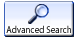
<style>
.page{position:relative;width:80px;height:40px;background:#ffffff}
.page>*{position:absolute;margin:0}
.t1{font:10px "MyriadPro-Regular";letter-spacing:0.005em;scale:0.9 1}
</style>
<div class="page">
<p class="t1" style="left:6px;top:25px;width:65px;height:8px">Advanced Search</p>
</div>
